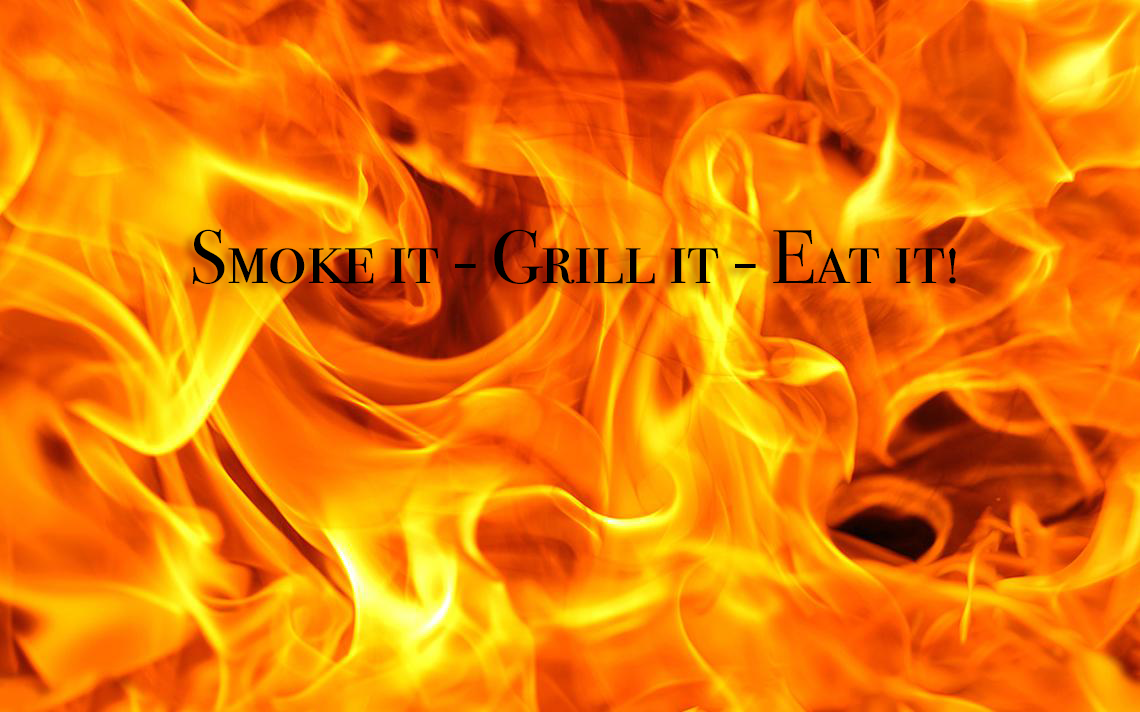
<style>
.page{position:relative;width:1140px;height:712px}
.page>*{position:absolute;margin:0}
.t1{font:75.8px "BodoniSvtyTwoSCITCTT-Book";color:#000000}
</style>
<div class="page">
<p class="t1" style="left:192px;top:229px;width:764px;height:55px">Smoke it - Grill it - Eat it!</p>
</div>
